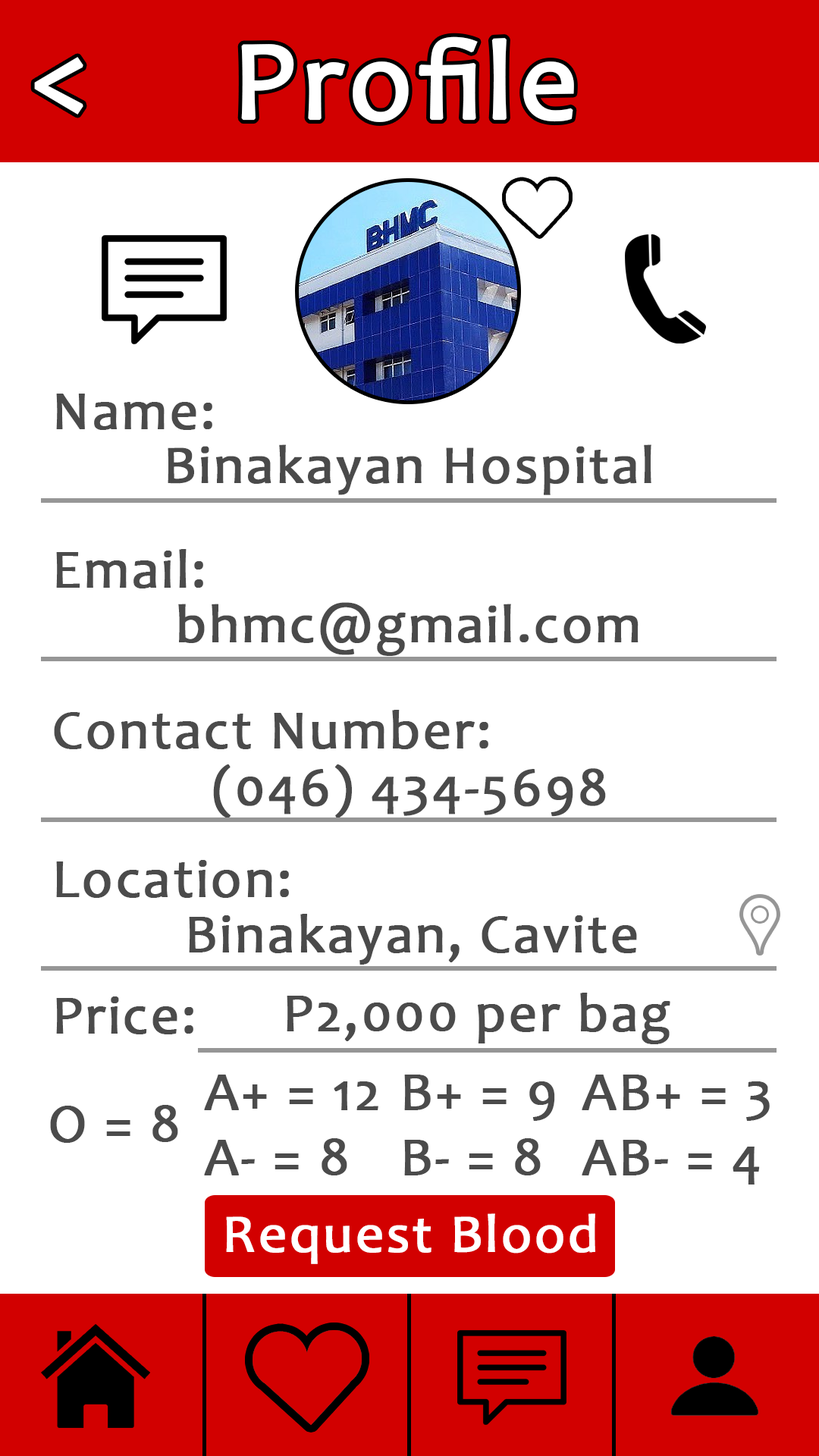
<style>
.page{position:relative;width:819px;height:1456px;background:#ffffff}
.page>*{position:absolute;margin:0}
.t1{font:113.4px "Candara";letter-spacing:0.03em;color:#ffffff;font-weight:bold}
.t2{font:113.7px "Candara";letter-spacing:0.03em;color:#ffffff;font-weight:bold}
.t3{font:54.6px "Candara";letter-spacing:0.03em;color:#4b4b4b;font-weight:bold}
.t4{font:54.3px "Candara";letter-spacing:0.03em;color:#4a4a4a;font-weight:bold}
.t5{font:54.6px "Candara";letter-spacing:0.03em;color:#4a4a4a;font-weight:bold}
.t6{font:54.3px "Candara";letter-spacing:0.03em;color:#ffffff;font-weight:bold}
</style>
<div class="page">
<p class="t1" style="left:241px;top:36px;width:333px;height:86px">Profile</p>
<p class="t2" style="left:34px;top:57px;width:49px;height:58px">&lt;</p>
<p class="t3" style="left:56px;top:394px;width:156px;height:36px">Name:</p>
<p class="t4" style="left:168px;top:444px;width:483px;height:51px">Binakayan Hospital</p>
<p class="t3" style="left:56px;top:549px;width:147px;height:39px">Email:</p>
<p class="t4" style="left:178px;top:602px;width:461px;height:54px">bhmc@gmail.com</p>
<p class="t3" style="left:54px;top:710px;width:434px;height:39px">Contact Number:</p>
<p class="t4" style="left:213px;top:764px;width:393px;height:54px">(046) 434-5698</p>
<p class="t3" style="left:56px;top:860px;width:233px;height:38px">Location:</p>
<p class="t5" style="left:189px;top:914px;width:448px;height:51px">Binakayan, Cavite</p>
<p class="t3" style="left:56px;top:996px;width:137px;height:38px">Price:</p>
<p class="t3" style="left:287px;top:993px;width:383px;height:51px">P2,000 per bag</p>
<p class="t3" style="left:204px;top:1075px;width:174px;height:100px">A+ = 12<br>A- = 8</p>
<p class="t3" style="left:404px;top:1075px;width:151px;height:100px">B+ = 9<br>B- = 8</p>
<p class="t3" style="left:582px;top:1075px;width:188px;height:110px">AB+ = 3<br>AB- = 4</p>
<p class="t3" style="left:50px;top:1105px;width:128px;height:38px">O = 8</p>
<p class="t6" style="left:226px;top:1213px;width:369px;height:51px">Request Blood</p>
</div>
